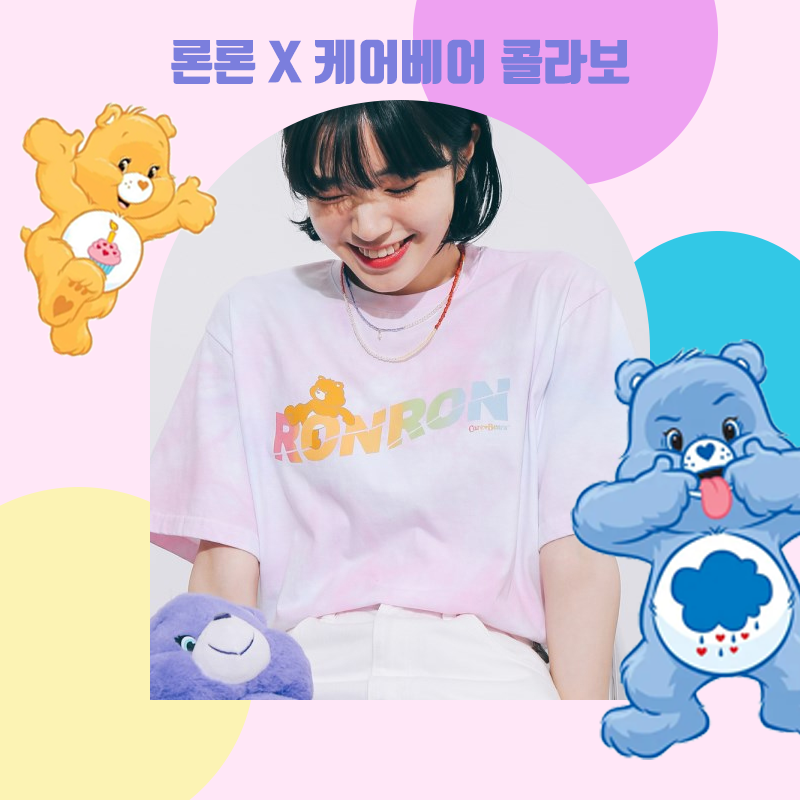
<style>
.page{position:relative;width:800px;height:800px;background:#ffe7f7}
.page>*{position:absolute;margin:0}
.t1{font:48px "TmonMonsoriBlack";color:#7b7edd}
</style>
<div class="page">
<p class="t1" style="left:171px;top:39px;width:459px;height:45px">론론 X 케어베어 콜라보</p>
</div>
